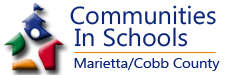
<style>
.page{position:relative;width:250px;height:75px;background:#ffffff}
.page>*{position:absolute;margin:0}
.t1{font:24.7px "SegoeUI";color:#0c267a}
.t2{font:14.4px "SegoeUI";color:#0c267a}
</style>
<div class="page">
<p class="t1" style="left:70px;top:5px;width:146px;height:20px">Communities</p>
<p class="t1" style="left:74px;top:27px;width:114px;height:20px">In Schools</p>
<p class="t2" style="left:74px;top:58px;width:146px;height:13px">Marietta/Cobb County</p>
</div>
